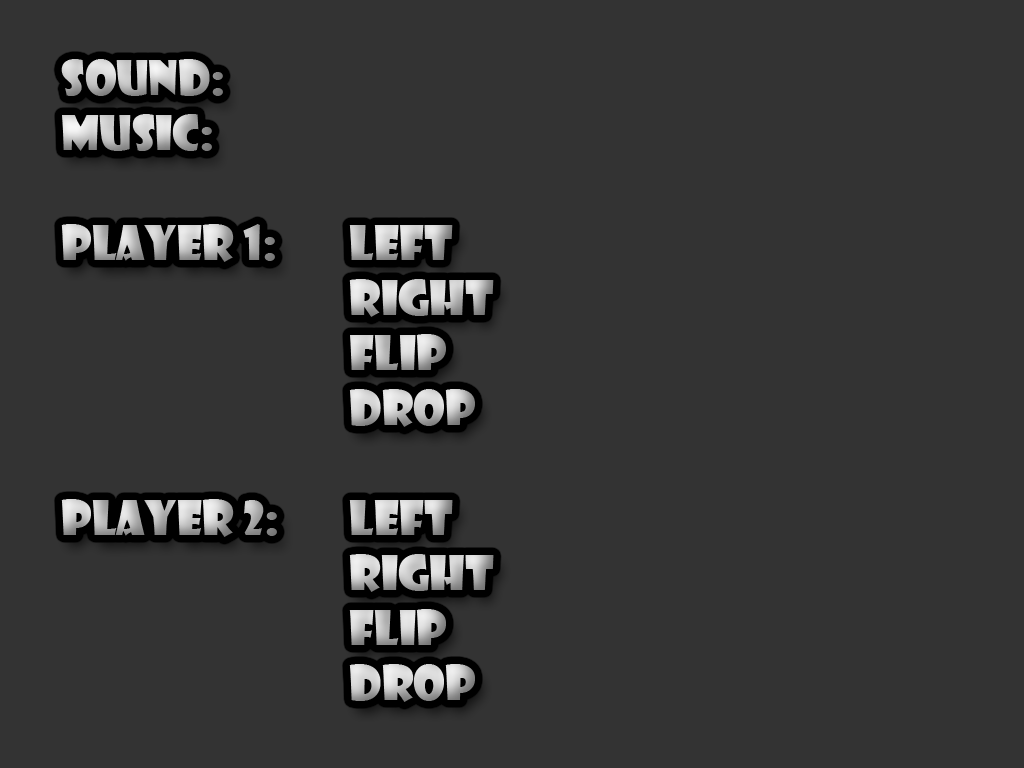
<style>
.page{position:relative;width:1024px;height:768px;background:#333333}
.page>*{position:absolute;margin:0}
.t1{font:45.8px "ShowcardGothic-Reg"}
</style>
<div class="page">
<p class="t1" style="left:61px;top:59px;width:433px;height:643px">Sound:<br>Music:<br><br>Player 1:   LEFT<br>        RIGHT<br>        FLIP<br>        DROP<br><br>player 2:  Left<br>        right<br>        flip<br>        drop</p>
</div>
